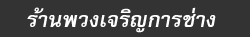
<style>
.page{position:relative;width:250px;height:37px;background:#333333}
.page>*{position:absolute;margin:0}
.t1{font:30px "FreesiaUPCBoldItalic";color:#ffffff}
</style>
<div class="page">
<p class="t1" style="left:27px;top:7px;width:189px;height:26px">ร้านพวงเจริญการช่าง</p>
</div>
